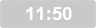
<style>
.page{position:relative;width:96px;height:28px;background:#c9c9c9}
.page>*{position:absolute;margin:0}
.t1{font:18.2px "Arial-BoldMT";color:#ffffff}
</style>
<div class="page">
<p class="t1" style="left:26px;top:7px;width:46px;height:13px">11:50</p>
</div>
